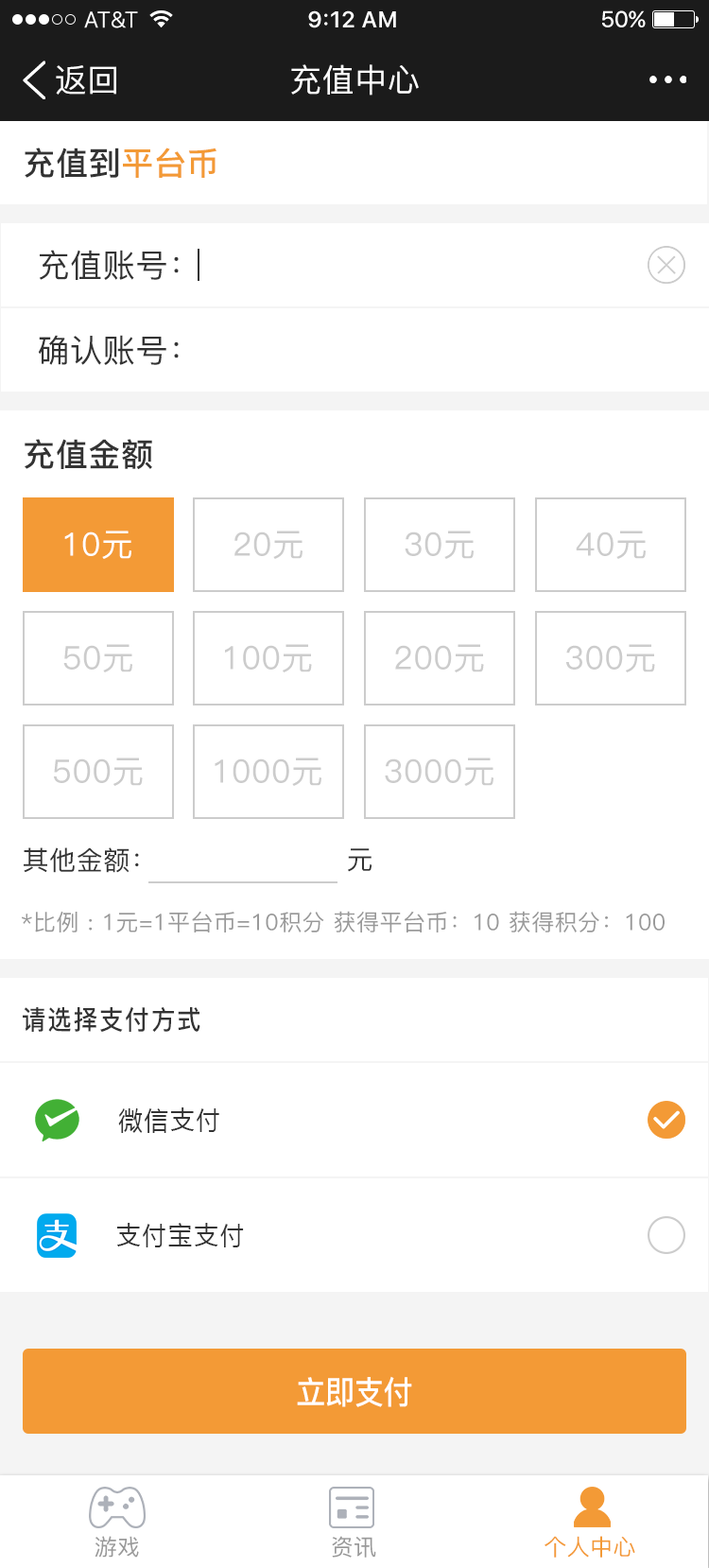
<style>
.page{position:relative;width:709px;height:1568px;background:#ffffff}
.page>*{position:absolute;margin:0}
.t1{font:32.2px "PingFang-SC-Medium";letter-spacing:0.02em;color:#ffffff}
.t2{font:32.2px "PingFang-SC-Bold";letter-spacing:0.02em;color:#333333}
.t3{font:32.2px "PingFang-SC-Bold";letter-spacing:0.02em;color:#f39a36}
.t4{font:32.2px "PingFang-SC-Medium";letter-spacing:0.02em;color:#333333}
.t5{font:32.2px "PingFang-SC-Medium";letter-spacing:0.02em;color:#cccccc}
.t6{font:26.5px "PingFang-SC-Medium";letter-spacing:0.02em;color:#333333}
.t7{font:22.7px "PingFang-SC-Medium";letter-spacing:0.02em;color:#999999}
.t8{font:26.5px "PingFang-SC-Bold";letter-spacing:0.08em;color:#333333;scale:0.91 1}
.t9{font:26.5px "MicrosoftYaHei";letter-spacing:0.08em;color:#333333;scale:0.91 1}
.t10{font:32.2px "PingFang-SC-Bold";color:#ffffff;scale:0.91 1}
.t11{font:22.7px "PingFang-SC-Medium";letter-spacing:0.02em;color:#f39a36}
</style>
<div class="page">
<p class="t1" style="left:56px;top:65px;width:60px;height:30px">返回</p>
<p class="t1" style="left:291px;top:64px;width:128px;height:32px">充值中心</p>
<p class="t2" style="left:25px;top:148px;width:192px;height:30px">充值到<span class="t3">平台币</span></p>
<p class="t4" style="left:39px;top:250px;width:140px;height:30px">充值账号：</p>
<p class="t4" style="left:38px;top:335px;width:141px;height:30px">确认账号：</p>
<p class="t2" style="left:25px;top:439px;width:127px;height:30px">充值金额</p>
<p class="t1" style="left:64px;top:531px;width:67px;height:28px">10元</p>
<p class="t5" style="left:235px;top:531px;width:68px;height:28px">20元</p>
<p class="t5" style="left:405px;top:531px;width:69px;height:28px">30元</p>
<p class="t5" style="left:576px;top:531px;width:70px;height:28px">40元</p>
<p class="t5" style="left:63px;top:644px;width:69px;height:28px">50元</p>
<p class="t5" style="left:225px;top:644px;width:87px;height:28px">100元</p>
<p class="t5" style="left:395px;top:644px;width:89px;height:28px">200元</p>
<p class="t5" style="left:566px;top:644px;width:89px;height:28px">300元</p>
<p class="t5" style="left:54px;top:758px;width:89px;height:28px">500元</p>
<p class="t5" style="left:215px;top:758px;width:107px;height:28px">1000元</p>
<p class="t5" style="left:385px;top:758px;width:109px;height:28px">3000元</p>
<p class="t6" style="left:24px;top:847px;width:115px;height:26px">其他金额：</p>
<p class="t6" style="left:348px;top:848px;width:24px;height:24px">元</p>
<p class="t7" style="left:22px;top:911px;width:643px;height:21px">*比例 : 1元=1平台币=10积分 获得平台币：10 获得积分：100</p>
<p class="t8" style="left:23px;top:1006px;width:177px;height:26px">请选择支付方式</p>
<p class="t9" style="left:118px;top:1107px;width:101px;height:26px">微信支付</p>
<p class="t9" style="left:117px;top:1223px;width:127px;height:24px">支付宝支付</p>
<p class="t10" style="left:297px;top:1376px;width:115px;height:31px">立即支付</p>
<p class="t7" style="left:95px;top:1536px;width:44px;height:22px">游戏</p>
<p class="t7" style="left:332px;top:1536px;width:44px;height:22px">资讯</p>
<p class="t11" style="left:545px;top:1536px;width:91px;height:22px">个人中心</p>
</div>
